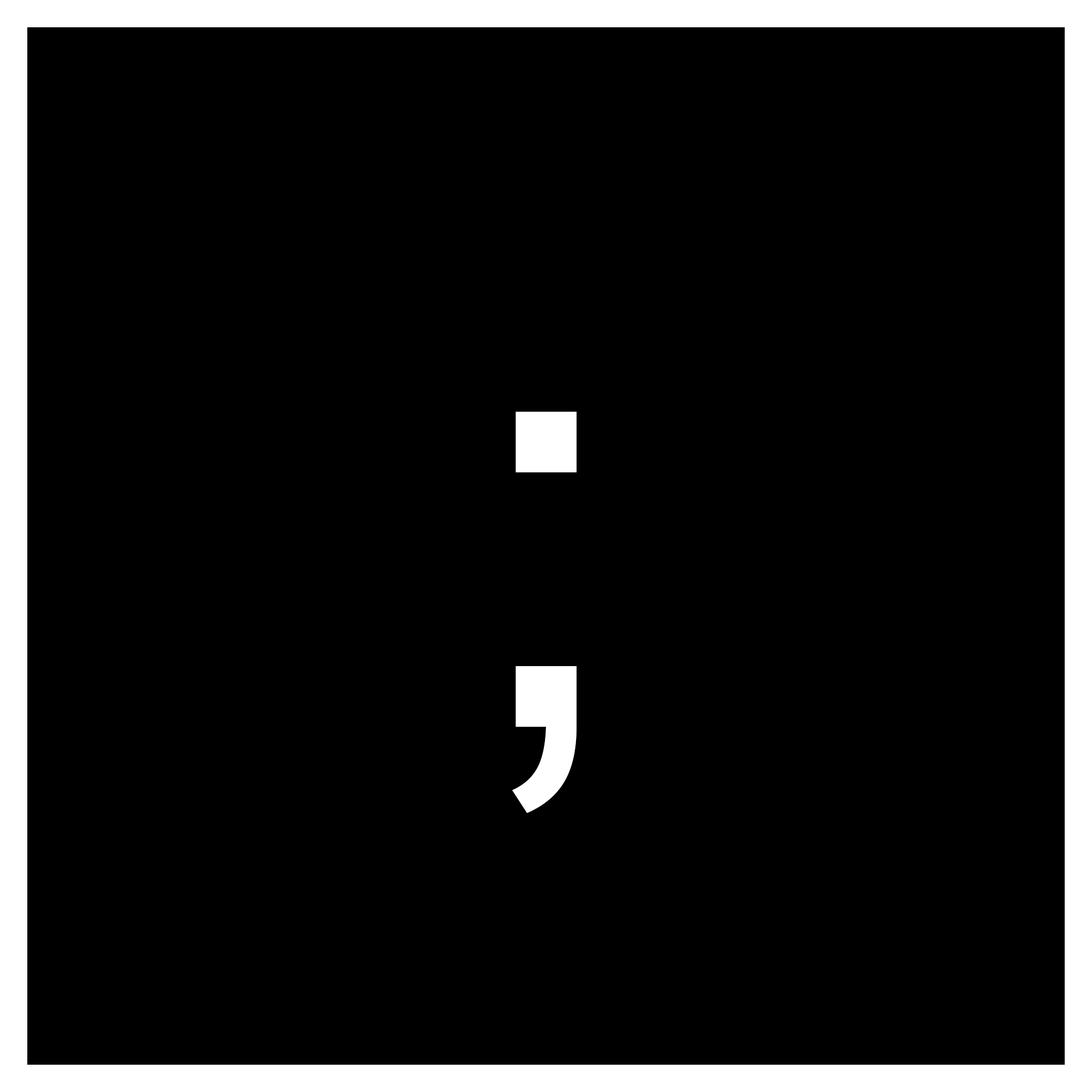
<style>
.page{position:relative;width:1092px;height:1092px;background:#000000}
.page>*{position:absolute;margin:0}
.t1{font:606.7px "ArialMT";color:#ffffff}
</style>
<div class="page">
<p class="t1" style="left:512px;top:412px;width:65px;height:401px">;</p>
</div>
